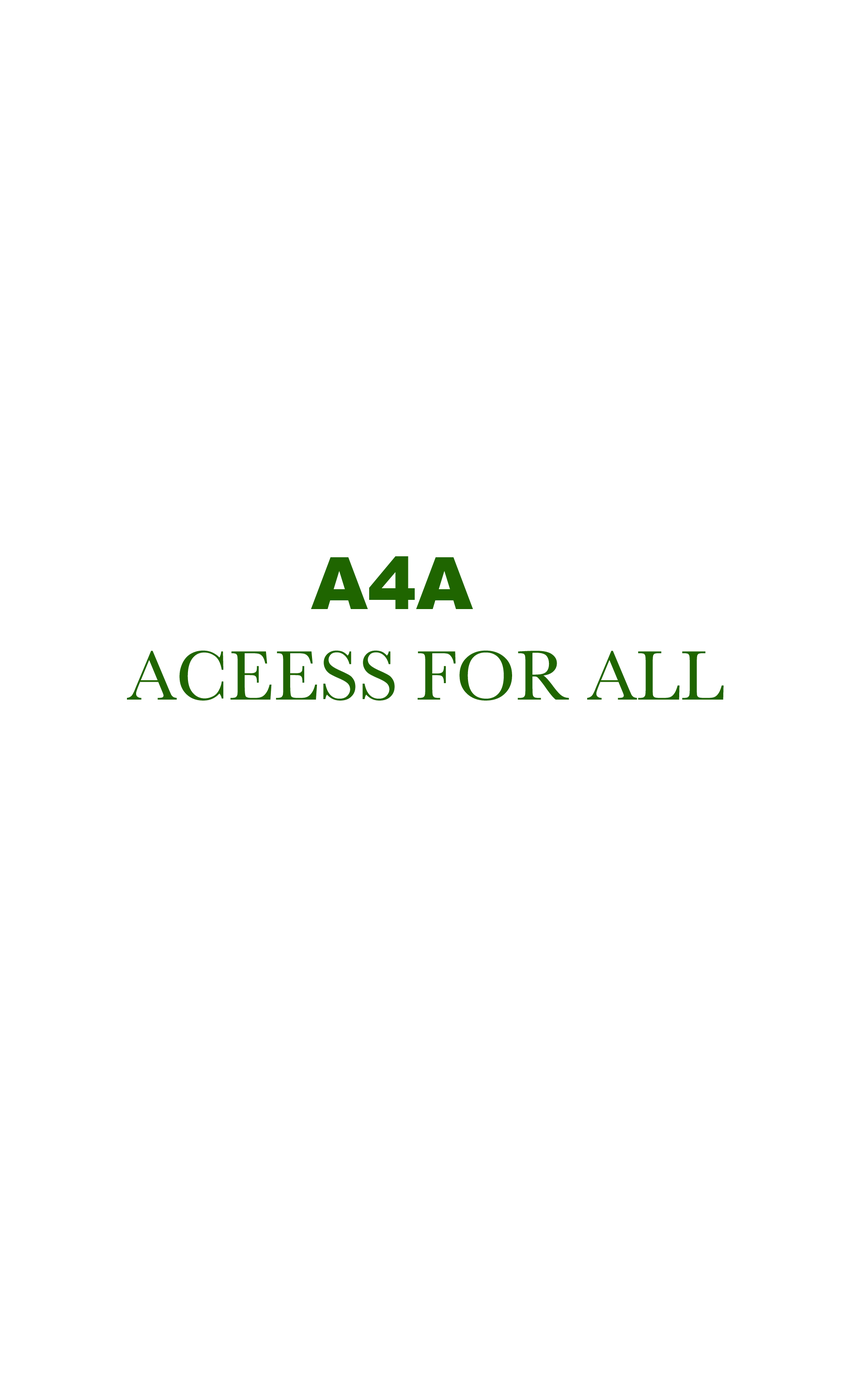
<style>
.page{position:relative;width:858px;height:1390px;background:#ffffff}
.page>*{position:absolute;margin:0}
.t1{font:72.6px "Arial-Black";color:#1f6500}
.t2{font:72.6px "Baskerville";color:#1f6500}
</style>
<div class="page">
<p class="t1" style="left:311px;top:556px;width:162px;height:53px">A4A</p>
<p class="t2" style="left:127px;top:650px;width:597px;height:51px">ACEESS FOR ALL</p>
</div>
